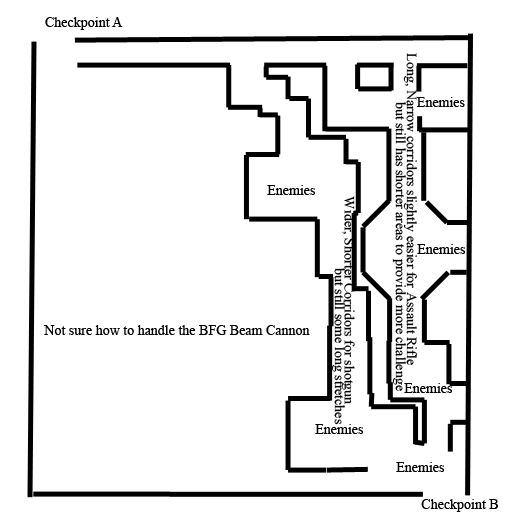
<style>
.page{position:relative;width:512px;height:512px;background:#ffffff}
.page>*{position:absolute;margin:0}
.t1{font:14px "TimesNewRomanPSMT";color:#000000}
</style>
<div class="page">
<p class="t1" style="left:45px;top:17px;width:78px;height:13px">Checkpoint A</p>
<p class="t1" style="left:403px;top:53px;width:14px;height:312px;rotate:90deg">Long, Narrow corridors slightly easier for Assault Rifle</p>
<p class="t1" style="left:392px;top:102px;width:14px;height:289px;rotate:90deg">but still has shorter areas to provide more challenge</p>
<p class="t1" style="left:416px;top:97px;width:49px;height:10px">Enemies</p>
<p class="t1" style="left:267px;top:185px;width:48px;height:10px">Enemies</p>
<p class="t1" style="left:341px;top:196px;width:14px;height:208px;rotate:90deg">Wider, Shorter Corridors for shotgun</p>
<p class="t1" style="left:417px;top:244px;width:48px;height:10px">Enemies</p>
<p class="t1" style="left:331px;top:268px;width:14px;height:157px;rotate:90deg">but still some long stretches</p>
<p class="t1" style="left:43px;top:325px;width:267px;height:10px">Not sure how to handle the BFG Beam Cannon</p>
<p class="t1" style="left:404px;top:383px;width:48px;height:10px">Enemies</p>
<p class="t1" style="left:315px;top:424px;width:48px;height:10px">Enemies</p>
<p class="t1" style="left:396px;top:462px;width:48px;height:10px">Enemies</p>
<p class="t1" style="left:421px;top:499px;width:77px;height:13px">Checkpoint B</p>
</div>
